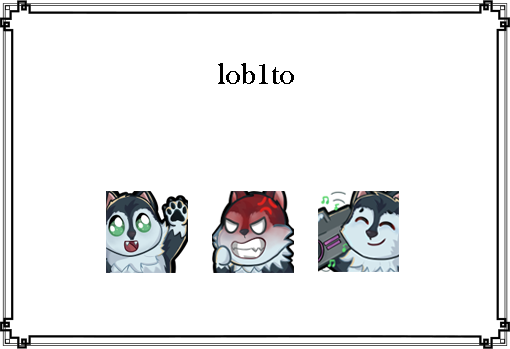
<style>
.page{position:relative;width:510px;height:349px;background:#ffffff}
.page>*{position:absolute;margin:0}
.t1{font:30px "BaskOldFace";color:#000000}
</style>
<div class="page">
<p class="t1" style="left:218px;top:63px;width:76px;height:21px">lob1to</p>
</div>
